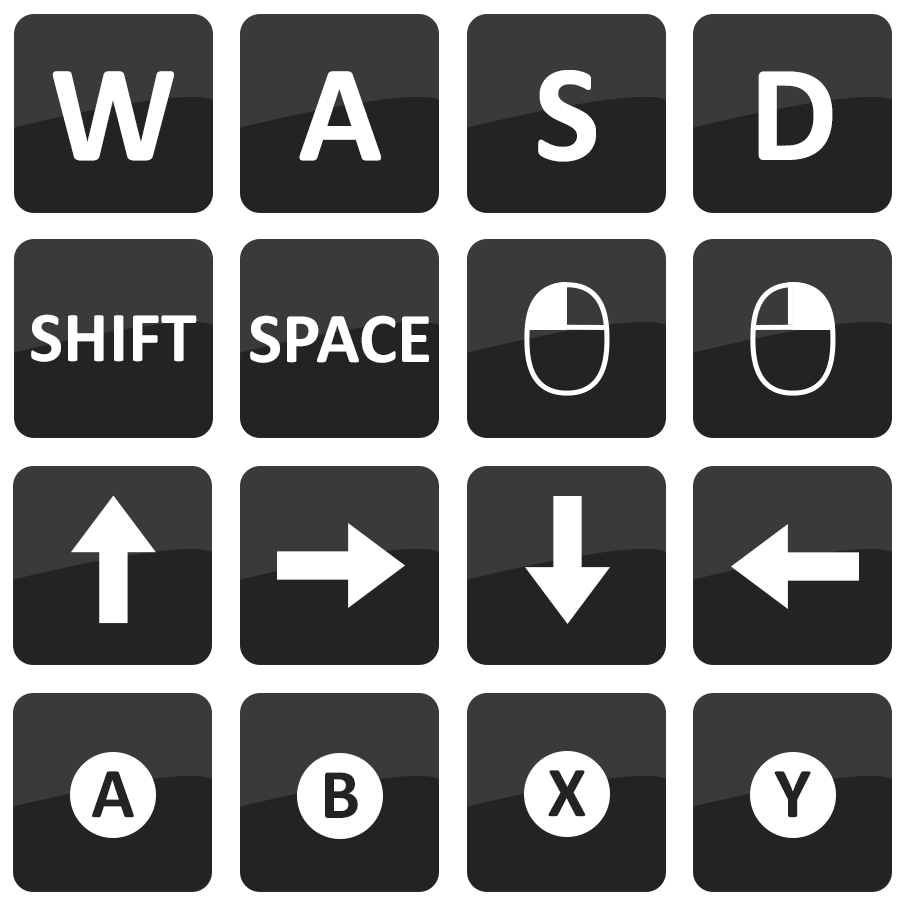
<style>
.page{position:relative;width:907px;height:907px;background:#232323}
.page>*{position:absolute;margin:0}
.t1{font:140px "Calibri-Bold";color:#ffffff;text-transform:uppercase}
.t2{font:72px "Calibri-Bold";color:#ffffff;text-transform:uppercase}
.t3{font:72px "Calibri-Bold";color:#232323;text-transform:uppercase}
</style>
<div class="page">
<p class="t1" style="left:52px;top:71px;width:122px;height:90px">W</p>
<p class="t1" style="left:299px;top:71px;width:82px;height:90px">A</p>
<p class="t1" style="left:538px;top:70px;width:58px;height:92px">S</p>
<p class="t1" style="left:758px;top:71px;width:75px;height:89px">D</p>
<p class="t2" style="left:31px;top:314px;width:166px;height:48px">Shift</p>
<p class="t2" style="left:250px;top:315px;width:179px;height:48px">Space</p>
<p class="t3" style="left:92px;top:771px;width:42px;height:47px">A</p>
<p class="t3" style="left:325px;top:772px;width:33px;height:46px">B</p>
<p class="t3" style="left:548px;top:770px;width:38px;height:47px">X</p>
<p class="t3" style="left:774px;top:771px;width:37px;height:47px">Y</p>
</div>
